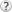
<style>
.page{position:relative;width:12px;height:12px}
.page>*{position:absolute;margin:0}
.t1{font:11px "Tahoma";color:#505050}
</style>
<div class="page">
<p class="t1" style="left:4px;top:1px;width:5px;height:10px">?</p>
</div>
